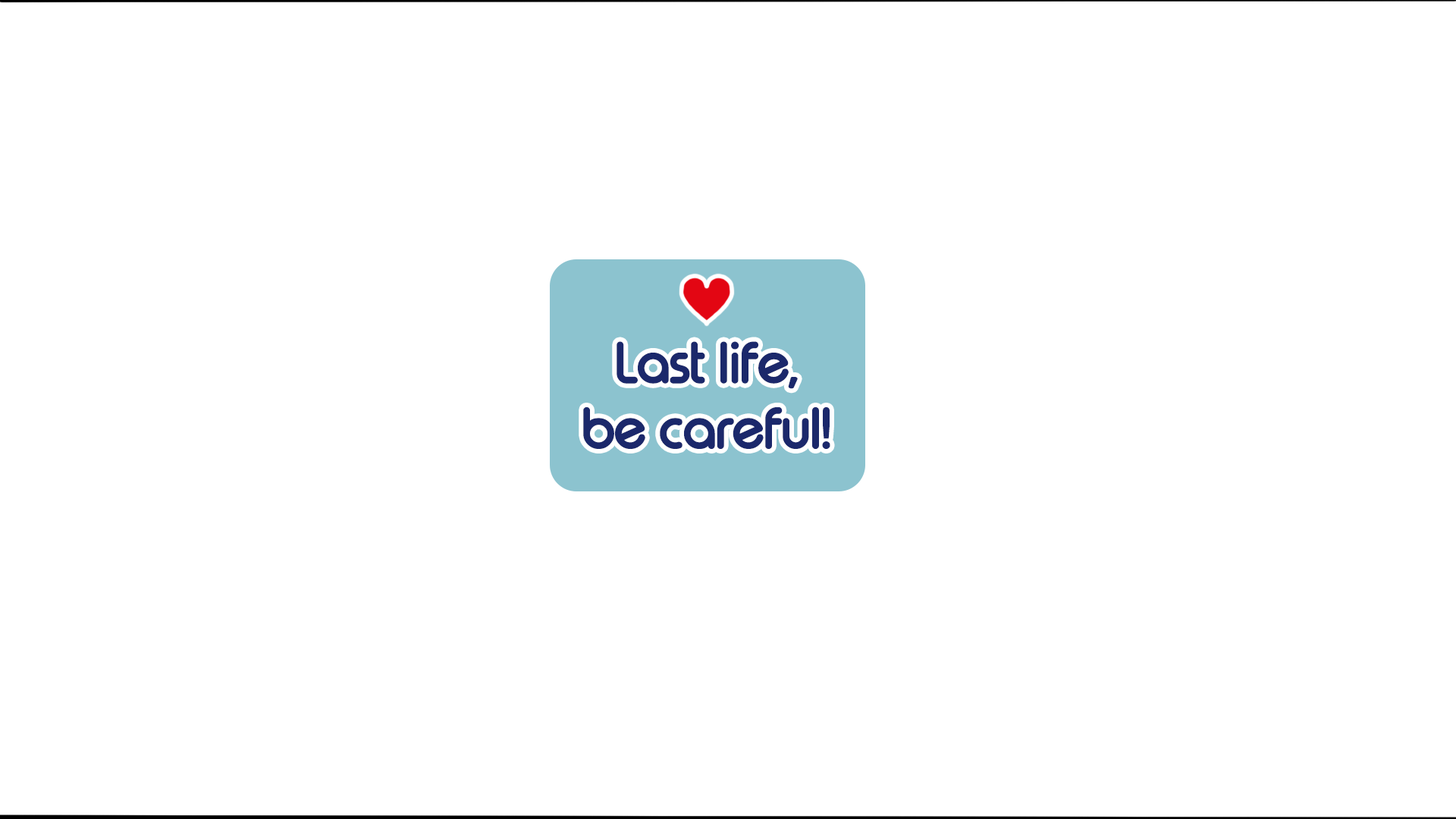
<style>
.page{position:relative;width:1456px;height:819px;background:#ffffff}
.page>*{position:absolute;margin:0}
.t1{font:54.6px "TypoRoundBoldDemo";letter-spacing:-0.05em;color:#1b286b}
</style>
<div class="page">
<p class="t1" style="left:583px;top:341px;width:247px;height:108px;text-align:center">Last life,<br>be careful!</p>
</div>
